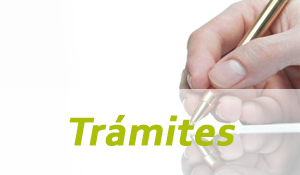
<style>
.page{position:relative;width:300px;height:175px;background:#ffffff}
.page>*{position:absolute;margin:0}
.t1{font:41.7px "Corbel-Bold";letter-spacing:0.005em;color:#abbf08;font-weight:bold;font-style:italic}
</style>
<div class="page">
<p class="t1" style="left:69px;top:115px;width:166px;height:31px">Trámites</p>
</div>
